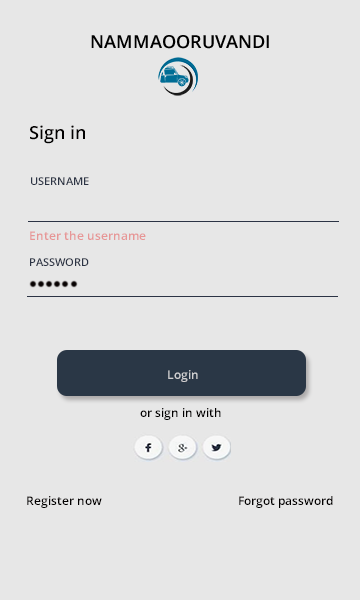
<style>
.page{position:relative;width:360px;height:600px;background:#e7e7e7}
.page>*{position:absolute;margin:0}
.t1{font:18px "OpenSans-Semibold";color:#020000}
.t2{font:11px "OpenSans-Semibold";color:#2c3445}
.t3{font:12px "OpenSans-Semibold";color:#e79696}
.t4{font:12px "OpenSans-Semibold";color:#e7e7e7}
.t5{font:12px "OpenSans-Semibold";color:#020000}
.t6{font:12px "OpenSans-Semibold";color:#030101}
</style>
<div class="page">
<p class="t1" style="left:30px;top:125px;width:55px;height:19px">Sign in</p>
<p class="t2" style="left:31px;top:177px;width:58px;height:8px">USERNAME</p>
<p class="t3" style="left:30px;top:231px;width:116px;height:9px">Enter the username</p>
<p class="t2" style="left:30px;top:258px;width:59px;height:8px">PASSWORD</p>
<p class="t4" style="left:168px;top:370px;width:30px;height:12px;opacity:0.7">Login</p>
<p class="t5" style="left:140px;top:408px;width:81px;height:12px">or sign in with</p>
<p class="t6" style="left:27px;top:496px;width:75px;height:12px">Register now</p>
<p class="t5" style="left:239px;top:496px;width:94px;height:12px">Forgot password</p>
</div>
